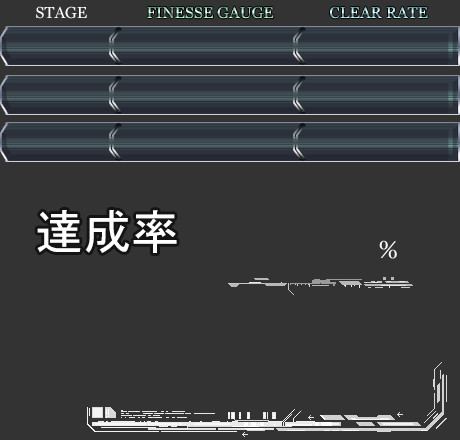
<style>
.page{position:relative;width:460px;height:440px;background:#333333}
.page>*{position:absolute;margin:0}
.t1{font:16px "Vani";color:#ffffff}
.t2{font:16px "Vani"}
.t3{font:48px "MS-UIGothic";color:#ffffff}
.t4{font:24px "Vani";color:#ffffff}
</style>
<div class="page">
<p class="t1" style="left:36px;top:6px;width:51px;height:13px">STAGE</p>
<p class="t2" style="left:147px;top:6px;width:127px;height:13px">FINESSE GAUGE</p>
<p class="t2" style="left:330px;top:6px;width:98px;height:13px">CLEAR RATE</p>
<p class="t3" style="left:37px;top:210px;width:140px;height:43px">達成率</p>
<p class="t4" style="left:379px;top:240px;width:18px;height:19px">%</p>
</div>
